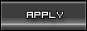
<style>
.page{position:relative;width:87px;height:31px;background:#3d3d3d}
.page>*{position:absolute;margin:0}
.t1{font:10px "04b08";color:#ffffff}
</style>
<div class="page">
<p class="t1" style="left:26px;top:11px;width:37px;height:7px">APPLY</p>
</div>
